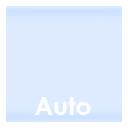
<style>
.page{position:relative;width:128px;height:128px;background:#deebff}
.page>*{position:absolute;margin:0}
.t1{font:25px "CenturyGothic-Bold";color:#ffffff}
</style>
<div class="page">
<p class="t1" style="left:35px;top:97px;width:56px;height:18px">Auto</p>
</div>
